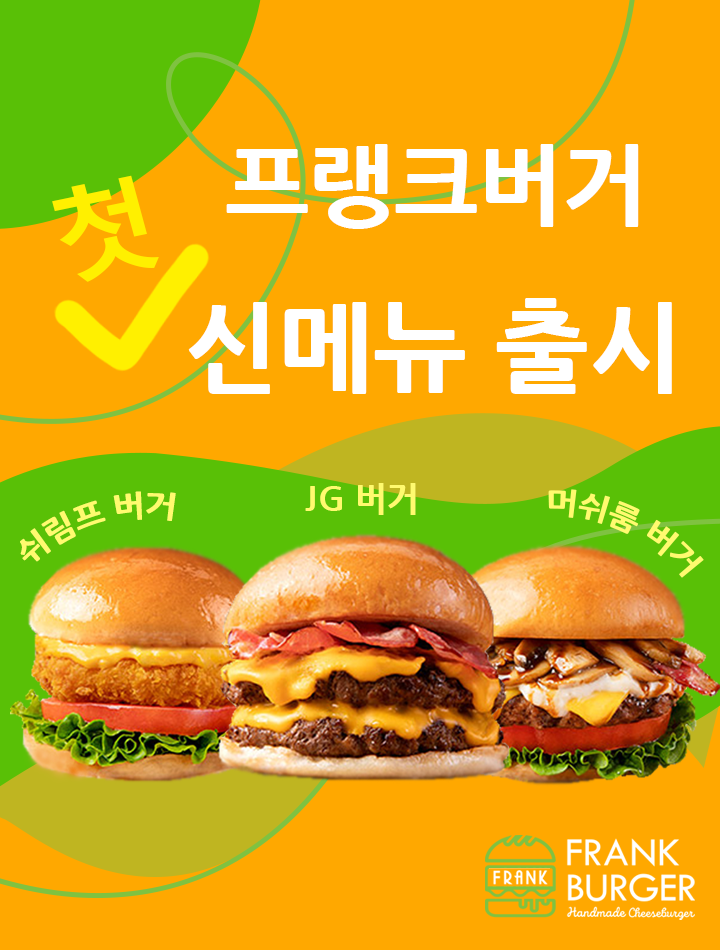
<style>
.page{position:relative;width:720px;height:950px;background:#ffa800}
.page>*{position:absolute;margin:0}
.t1{font:90px "NanumGothicExtraBold";color:#ffffff}
.t2{font:100.9px "MalgunGothicBold";color:#fff000;scale:1.07 1}
.t3{font:100px "NanumGothicExtraBold";color:#ffffff}
.t4{font:34.4px "NanumGothicExtraBold";color:#fffa6f}
.t5{font:30px "NanumGothicExtraBold";color:#fffa6f}
</style>
<div class="page">
<p class="t1" style="left:226px;top:144px;width:413px;height:85px">프랭크버거</p>
<p class="t2" style="left:52px;top:175px;width:107px;height:107px;rotate:-12deg">첫</p>
<p class="t3" style="left:188px;top:298px;width:484px;height:96px">신메뉴 출시</p>
<p class="t4" style="left:305px;top:483px;width:111px;height:32px">JG 버거</p>
<p class="t5" style="left:20px;top:491px;width:156px;height:71px;rotate:-18deg">쉬림프 버거</p>
<p class="t5" style="left:548px;top:489px;width:156px;height:89px;rotate:25deg">머쉬룸 버거</p>
</div>
